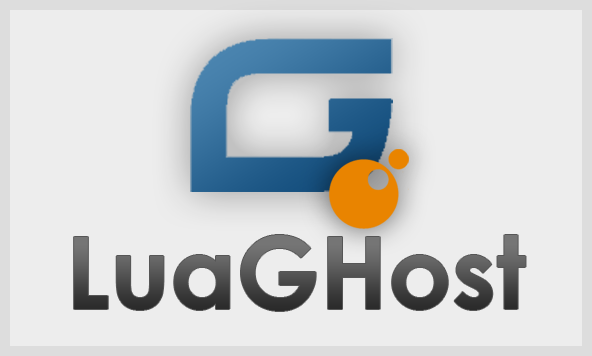
<style>
.page{position:relative;width:592px;height:356px;background:#ededed}
.page>*{position:absolute;margin:0}
.t1{font:100px "CenturyGothic-Bold"}
</style>
<div class="page">
<p class="t1" style="left:74px;top:235px;width:452px;height:76px">LuaGHost</p>
</div>
